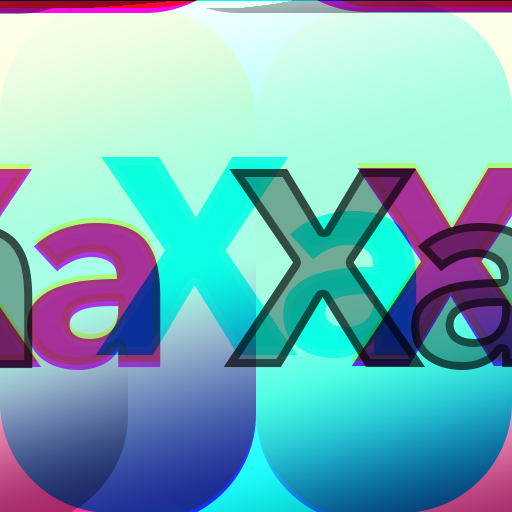
<style>
.page{position:relative;width:512px;height:512px}
.page>*{position:absolute;margin:0}
.t1{font:280px "AvenirNext-Bold";letter-spacing:-0.06em}
</style>
<div class="page">
<p class="t1" style="left:95px;top:156px;width:322px;height:201px">Xa</p>
</div>
